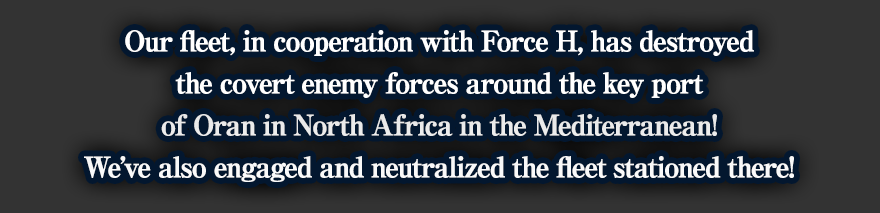
<style>
.page{position:relative;width:880px;height:213px;background:#333333}
.page>*{position:absolute;margin:0}
.t1{font:28px/42px "RyuminPro-ExBold";letter-spacing:-0.08em;color:#ffffff;font-weight:bold}
</style>
<div class="page">
<p class="t1" style="left:84px;top:30px;width:710px;height:152px;text-align:center">Our fleet, in cooperation with Force H, has destroyed<br>the covert enemy forces around the key port<br>of Oran in North Africa in the Mediterranean!<br>We’ve also engaged and neutralized the fleet stationed there!</p>
</div>
